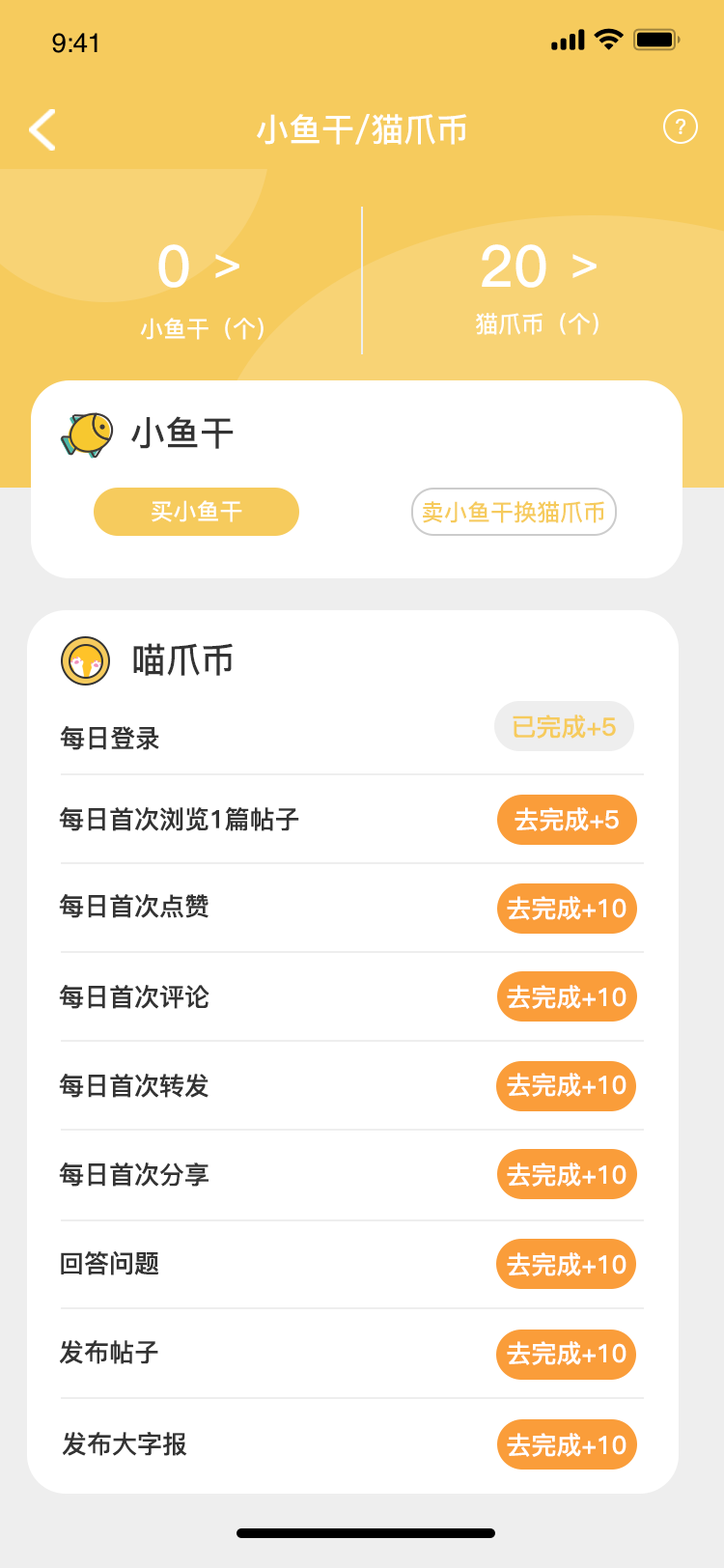
<style>
.page{position:relative;width:724px;height:1568px;background:#ffffff}
.page>*{position:absolute;margin:0}
.t1{font:32.8px "PingFang-SC-Bold";color:#ffffff}
.t2{font:21.4px "PingFang-SC-Bold";color:#ffffff}
.t3{font:57.9px "PingFang-SC-Bold";color:#ffffff}
.t4{font:46.3px "PingFang-SC-Bold";color:#ffffff}
.t5{font:23.2px "PingFang-SC-Bold";color:#ffffff}
.t6{font:34.8px "PingFang-SC-Bold";color:#333333}
.t7{font:23.2px "PingFang-SC-Bold";color:#f6cb5d}
.t8{font:25.1px "PingFang-SC-Bold";color:#f6cb5d}
.t9{font:25.1px "PingFang-SC-Bold";color:#333333}
.t10{font:25.1px "PingFang-SC-Bold";color:#ffffff}
</style>
<div class="page">
<p class="t1" style="left:257px;top:114px;width:210px;height:31px">小鱼干/猫爪币</p>
<p class="t2" style="left:676px;top:119px;width:10px;height:15px">?</p>
<p class="t3" style="left:158px;top:244px;width:31px;height:44px">0</p>
<p class="t3" style="left:482px;top:244px;width:64px;height:44px">20</p>
<p class="t4" style="left:215px;top:254px;width:24px;height:24px">&gt;</p>
<p class="t4" style="left:573px;top:254px;width:24px;height:24px">&gt;</p>
<p class="t5" style="left:140px;top:318px;width:124px;height:22px">小鱼干（个）</p>
<p class="t5" style="left:476px;top:313px;width:123px;height:22px">猫爪币（个）</p>
<p class="t6" style="left:131px;top:416px;width:103px;height:33px">小鱼干</p>
<p class="t5" style="left:152px;top:500px;width:90px;height:22px">买小鱼干</p>
<p class="t7" style="left:423px;top:501px;width:181px;height:22px">卖小鱼干换猫爪币</p>
<p class="t6" style="left:133px;top:643px;width:100px;height:33px">喵爪币</p>
<p class="t8" style="left:513px;top:714px;width:103px;height:25px">已完成+5</p>
<p class="t9" style="left:60px;top:726px;width:99px;height:24px">每日登录</p>
<p class="t9" style="left:59px;top:807px;width:240px;height:24px">每日首次浏览1篇帖子</p>
<p class="t10" style="left:515px;top:807px;width:104px;height:24px">去完成+5</p>
<p class="t9" style="left:59px;top:894px;width:150px;height:24px">每日首次点赞</p>
<p class="t10" style="left:507px;top:896px;width:120px;height:24px">去完成+10</p>
<p class="t9" style="left:59px;top:985px;width:151px;height:24px">每日首次评论</p>
<p class="t10" style="left:507px;top:985px;width:120px;height:24px">去完成+10</p>
<p class="t9" style="left:59px;top:1074px;width:150px;height:24px">每日首次转发</p>
<p class="t10" style="left:507px;top:1073px;width:120px;height:24px">去完成+10</p>
<p class="t9" style="left:59px;top:1162px;width:150px;height:25px">每日首次分享</p>
<p class="t10" style="left:507px;top:1162px;width:120px;height:25px">去完成+10</p>
<p class="t9" style="left:61px;top:1251px;width:97px;height:24px">回答问题</p>
<p class="t10" style="left:507px;top:1252px;width:120px;height:24px">去完成+10</p>
<p class="t9" style="left:59px;top:1340px;width:99px;height:24px">发布帖子</p>
<p class="t10" style="left:507px;top:1341px;width:120px;height:24px">去完成+10</p>
<p class="t9" style="left:62px;top:1432px;width:125px;height:24px">发布大字报</p>
<p class="t10" style="left:507px;top:1433px;width:120px;height:24px">去完成+10</p>
</div>
